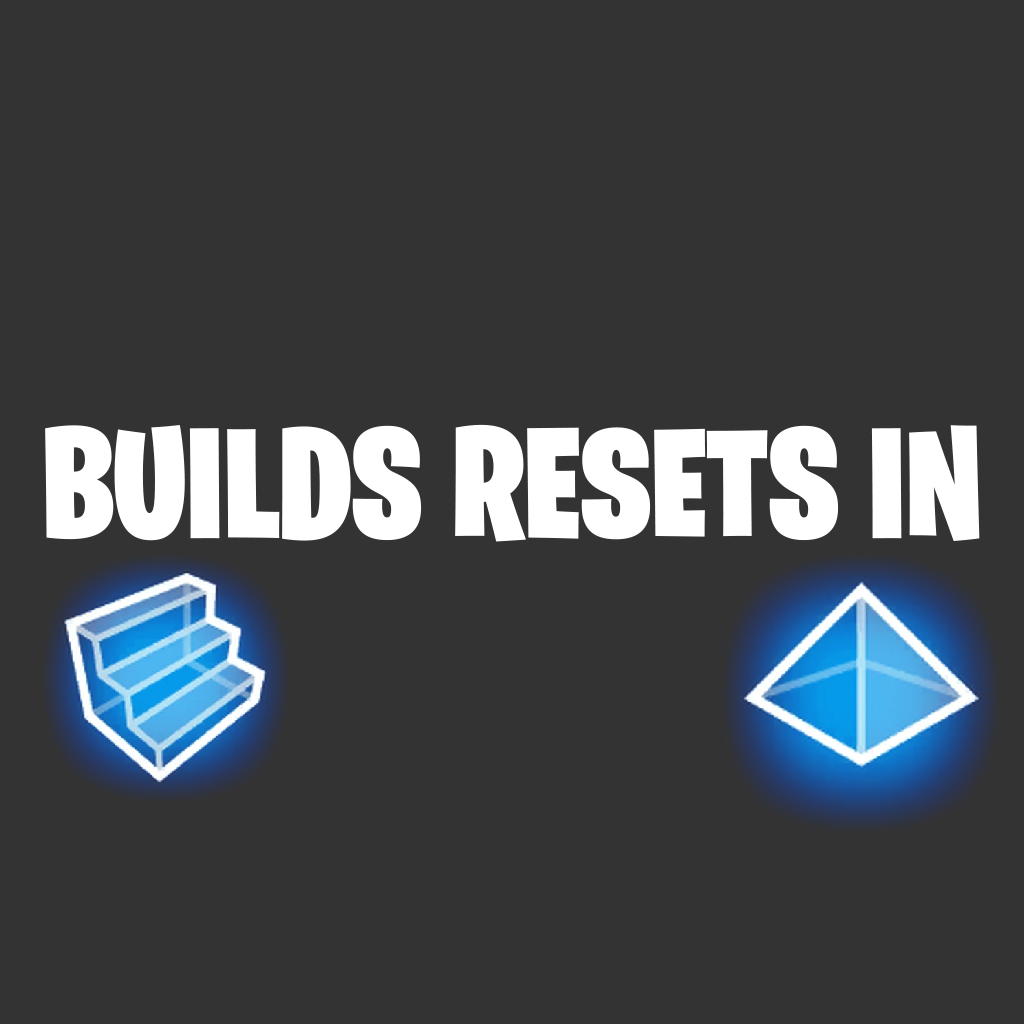
<style>
.page{position:relative;width:1024px;height:1024px;background:#333333}
.page>*{position:absolute;margin:0}
.t1{font:158px "BurbankBigCondensed-Black";color:#ffffff}
</style>
<div class="page">
<p class="t1" style="left:45px;top:424px;width:935px;height:118px">BUILDS RESETS IN</p>
</div>
